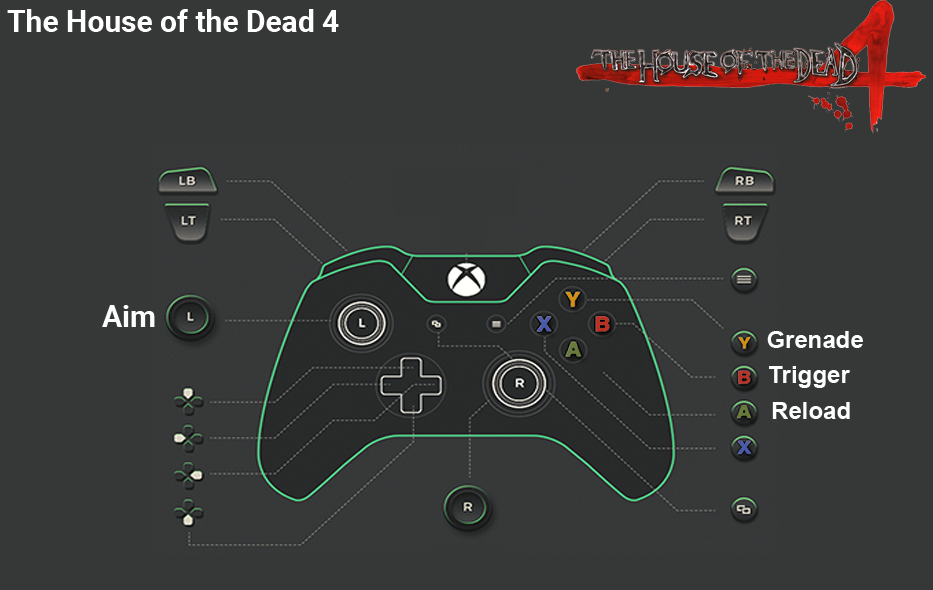
<style>
.page{position:relative;width:933px;height:590px;background:#363838}
.page>*{position:absolute;margin:0}
.t1{font:30px "Roboto-Bold";color:#ffffff}
.t2{font:30px "Roboto-Bold";color:#fefefe}
.t3{font:24px "Arial-BoldMT";color:#fefefe}
</style>
<div class="page">
<p class="t1" style="left:7px;top:9px;width:332px;height:23px">The House of the Dead 4</p>
<p class="t2" style="left:102px;top:305px;width:53px;height:22px">Aim</p>
<p class="t3" style="left:767px;top:331px;width:96px;height:17px">Grenade</p>
<p class="t3" style="left:769px;top:366px;width:81px;height:22px">Trigger</p>
<p class="t3" style="left:772px;top:402px;width:78px;height:17px">Reload</p>
</div>
